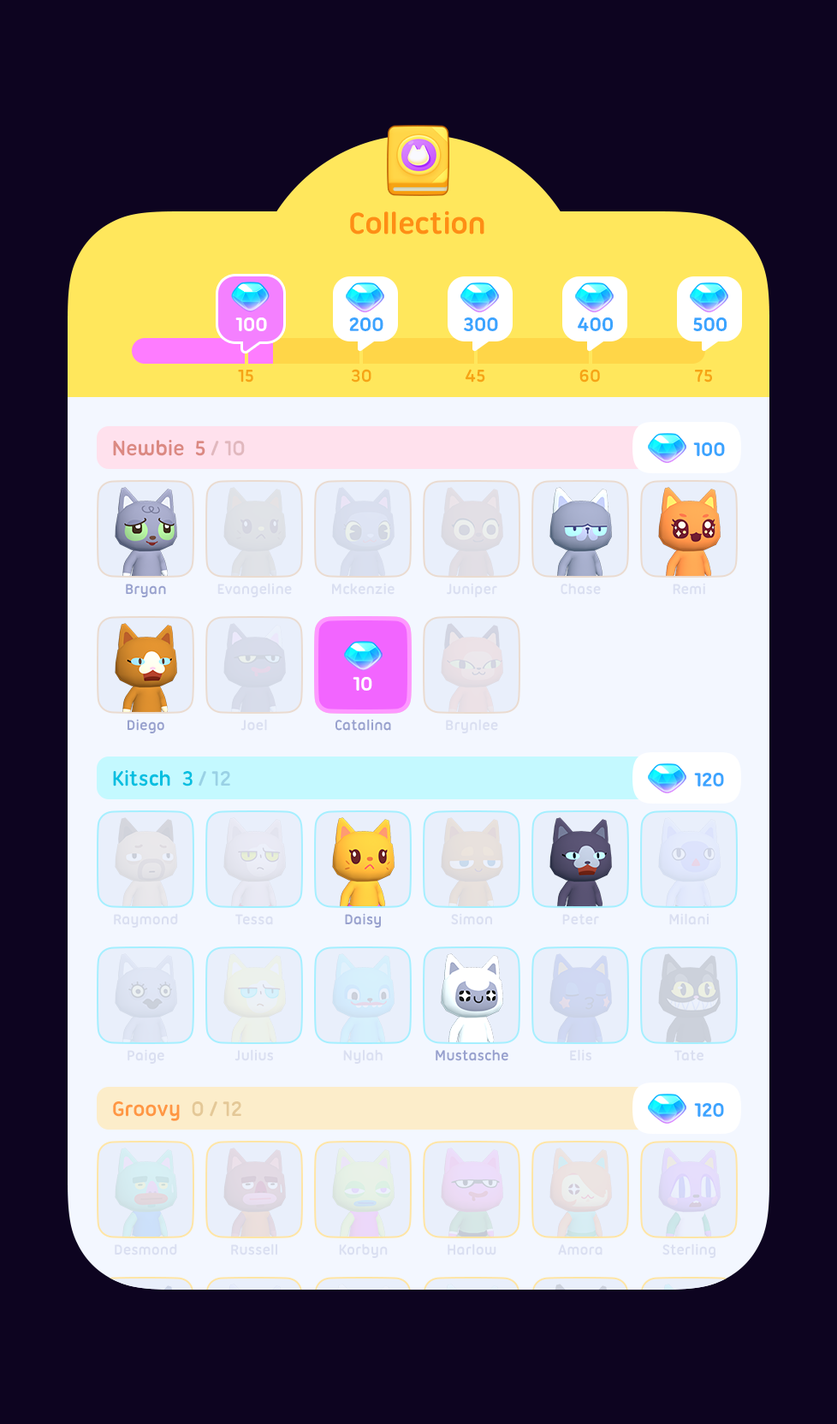
<style>
.page{position:relative;width:837px;height:1424px;background:#0d0420}
.page>*{position:absolute;margin:0}
.t1{font:32.5px "UbuntuTitling-Bold";letter-spacing:-0.025em;color:#fe8e15}
.t2{font:20.5px "UbuntuTitling-Bold";letter-spacing:-0.025em;color:#ffffff}
.t3{font:20.5px "UbuntuTitling-Bold";letter-spacing:-0.025em;color:#3ba4ff}
.t4{font:18.8px "UbuntuTitling-Bold";letter-spacing:-0.025em;color:#f6a415}
.t5{font:22.3px "UbuntuTitling-Bold";letter-spacing:-0.025em;color:#db8982}
.t6{font:22.3px "UbuntuTitling-Bold";letter-spacing:-0.025em;color:#e1b8be}
.t7{font:15.4px "UbuntuTitling-Bold";letter-spacing:-0.025em;color:#98a1ce}
.t8{font:15.4px "UbuntuTitling-Bold";letter-spacing:-0.025em;color:#dadff1}
.t9{font:22.3px "UbuntuTitling-Bold";letter-spacing:-0.025em;color:#01bfe0}
.t10{font:22.3px "UbuntuTitling-Bold";letter-spacing:-0.025em;color:#9ad1e5}
.t11{font:22.3px "UbuntuTitling-Bold";letter-spacing:-0.025em;color:#ff9743}
.t12{font:22.3px "UbuntuTitling-Bold";letter-spacing:-0.025em;color:#e4c897}
</style>
<div class="page">
<p class="t1" style="left:350px;top:211px;width:134px;height:24px">Collection</p>
<p class="t2" style="left:235px;top:318px;width:32px;height:13px">100</p>
<p class="t3" style="left:349px;top:318px;width:34px;height:13px">200</p>
<p class="t3" style="left:464px;top:318px;width:34px;height:13px">300</p>
<p class="t3" style="left:578px;top:318px;width:35px;height:13px">400</p>
<p class="t3" style="left:693px;top:318px;width:34px;height:13px">500</p>
<p class="t4" style="left:238px;top:370px;width:15px;height:13px">15</p>
<p class="t4" style="left:352px;top:369px;width:20px;height:14px">30</p>
<p class="t4" style="left:465px;top:369px;width:20px;height:14px">45</p>
<p class="t4" style="left:580px;top:369px;width:20px;height:14px">60</p>
<p class="t4" style="left:695px;top:370px;width:17px;height:13px">75</p>
<p class="t5" style="left:113px;top:440px;width:132px;height:16px">Newbie  5 <span class="t6">/ 10</span></p>
<p class="t3" style="left:693px;top:443px;width:32px;height:13px">100</p>
<p class="t7" style="left:126px;top:584px;width:40px;height:13px">Bryan</p>
<p class="t8" style="left:217px;top:583px;width:75px;height:14px">Evangeline</p>
<p class="t8" style="left:332px;top:583px;width:63px;height:12px">Mckenzie</p>
<p class="t8" style="left:447px;top:583px;width:50px;height:14px">Juniper</p>
<p class="t8" style="left:561px;top:583px;width:40px;height:12px">Chase</p>
<p class="t8" style="left:673px;top:583px;width:32px;height:12px">Remi</p>
<p class="t2" style="left:353px;top:677px;width:19px;height:14px">10</p>
<p class="t7" style="left:128px;top:719px;width:36px;height:15px">Diego</p>
<p class="t8" style="left:241px;top:719px;width:26px;height:12px">Joel</p>
<p class="t7" style="left:336px;top:719px;width:55px;height:12px">Catalina</p>
<p class="t8" style="left:446px;top:719px;width:52px;height:15px">Brynlee</p>
<p class="t9" style="left:113px;top:770px;width:117px;height:17px">Kitsch  3 <span class="t10">/ 12</span></p>
<p class="t3" style="left:694px;top:773px;width:30px;height:14px">120</p>
<p class="t8" style="left:114px;top:913px;width:64px;height:15px">Raymond</p>
<p class="t8" style="left:235px;top:914px;width:38px;height:11px">Tessa</p>
<p class="t7" style="left:345px;top:913px;width:36px;height:15px">Daisy</p>
<p class="t8" style="left:451px;top:913px;width:41px;height:12px">Simon</p>
<p class="t8" style="left:562px;top:914px;width:37px;height:11px">Peter</p>
<p class="t8" style="left:669px;top:913px;width:40px;height:12px">Milani</p>
<p class="t8" style="left:128px;top:1049px;width:36px;height:15px">Paige</p>
<p class="t8" style="left:235px;top:1049px;width:38px;height:12px">Julius</p>
<p class="t8" style="left:343px;top:1049px;width:40px;height:15px">Nylah</p>
<p class="t7" style="left:436px;top:1049px;width:72px;height:12px">Mustasche</p>
<p class="t8" style="left:570px;top:1049px;width:21px;height:12px">Elis</p>
<p class="t8" style="left:675px;top:1050px;width:29px;height:11px">Tate</p>
<p class="t11" style="left:113px;top:1102px;width:128px;height:19px">Groovy  <span class="t12">0 / 12</span></p>
<p class="t3" style="left:694px;top:1103px;width:30px;height:14px">120</p>
<p class="t8" style="left:115px;top:1244px;width:62px;height:12px">Desmond</p>
<p class="t8" style="left:231px;top:1244px;width:46px;height:12px">Russell</p>
<p class="t8" style="left:339px;top:1244px;width:49px;height:14px">Korbyn</p>
<p class="t8" style="left:448px;top:1244px;width:48px;height:12px">Harlow</p>
<p class="t8" style="left:558px;top:1245px;width:45px;height:11px">Amora</p>
<p class="t8" style="left:663px;top:1244px;width:53px;height:14px">Sterling</p>
</div>
